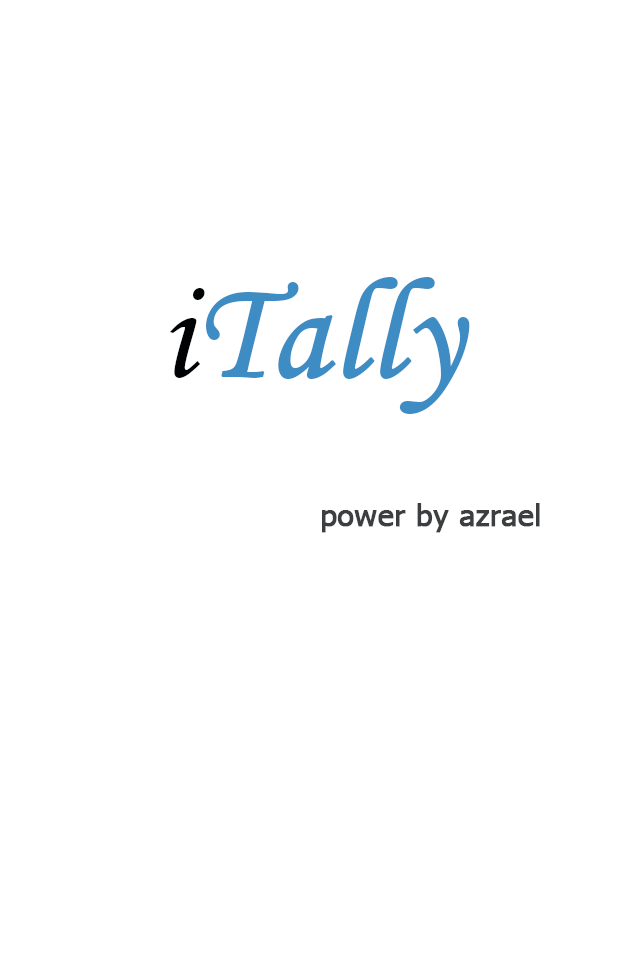
<style>
.page{position:relative;width:640px;height:960px;background:#ffffff}
.page>*{position:absolute;margin:0}
.t1{font:141.5px "MonotypeCorsiva";color:#3d8cc3;font-weight:bold}
.t2{font:141.5px "MonotypeCorsiva";color:#000204;font-weight:bold}
.t3{font:30px "Tahoma";color:#3c3e3f;font-weight:bold}
</style>
<div class="page">
<p class="t1" style="left:169px;top:277px;width:301px;height:137px"><span class="t2">i</span>Tally</p>
<p class="t3" style="left:322px;top:503px;width:218px;height:30px">power by azrael</p>
</div>
